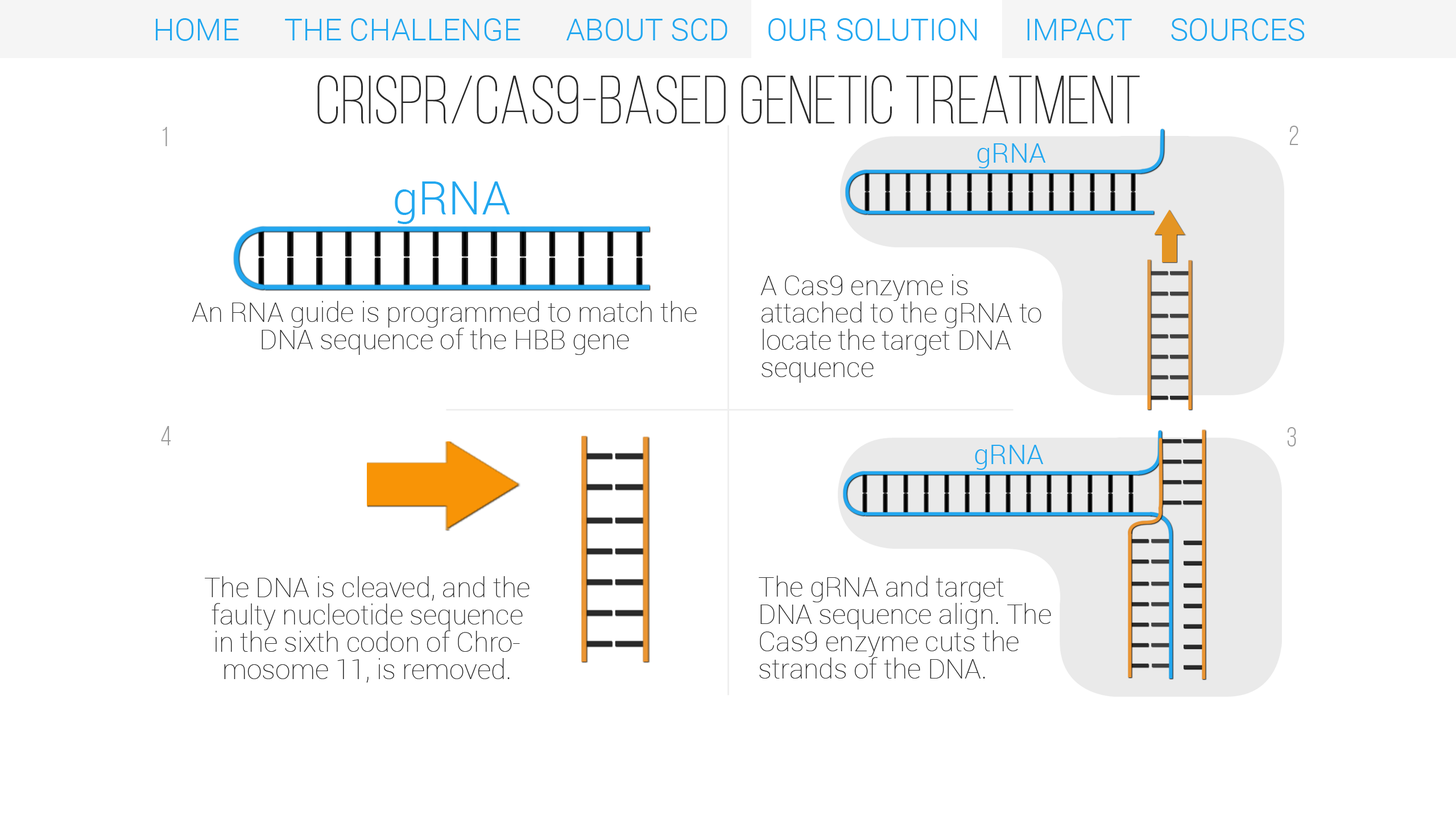
<style>
.page{position:relative;width:1456px;height:819px;background:#ffffff}
.page>*{position:absolute;margin:0}
.t1{font:30.7px "Roboto-Light";color:#22a7f0}
.t2{font:68.2px "BebasNeueLight";color:#2a2a2a}
.t3{font:27.3px "BebasNeueBook";color:#999999}
.t4{font:27.3px "Roboto-Light";color:#22a7f0}
.t5{font:46.1px "Roboto-Light";color:#22a7ef}
.t6{font:27.3px/27.3px "Roboto-Thin";color:#2a2a2a}
</style>
<div class="page">
<p class="t1" style="left:156px;top:18px;width:1149px;height:23px">HOME      THE CHALLENGE      ABOUT SCD     OUR SOLUTION      IMPACT     SOURCES</p>
<p class="t2" style="left:317px;top:75px;width:823px;height:49px">CRISPR/Cas9-based Genetic Treatment</p>
<p class="t3" style="left:1289px;top:126px;width:9px;height:19px">2</p>
<p class="t3" style="left:163px;top:127px;width:4px;height:19px">1</p>
<p class="t4" style="left:977px;top:143px;width:69px;height:25px">gRNA</p>
<p class="t5" style="left:395px;top:181px;width:115px;height:43px">gRNA</p>
<p class="t6" style="left:760px;top:274px;width:281px;height:109px">A Cas9 enzyme is<br>attached to the gRNA to locate the target DNA<br>sequence</p>
<p class="t6" style="left:192px;top:301px;width:505px;height:54px;text-align:center">An RNA guide is programmed to match the DNA sequence of the HBB gene</p>
<p class="t3" style="left:161px;top:426px;width:10px;height:19px">4</p>
<p class="t3" style="left:1287px;top:427px;width:9px;height:19px">3</p>
<p class="t4" style="left:975px;top:445px;width:69px;height:25px">gRNA</p>
<p class="t6" style="left:205px;top:576px;width:324px;height:106px;text-align:center">The DNA is cleaved, and the faulty nucleotide sequence in the sixth codon of Chromosome 11, is removed.</p>
<p class="t6" style="left:759px;top:576px;width:292px;height:103px">The gRNA and target <br>DNA sequence align. The Cas9 enzyme cuts the strands of the DNA.</p>
</div>
